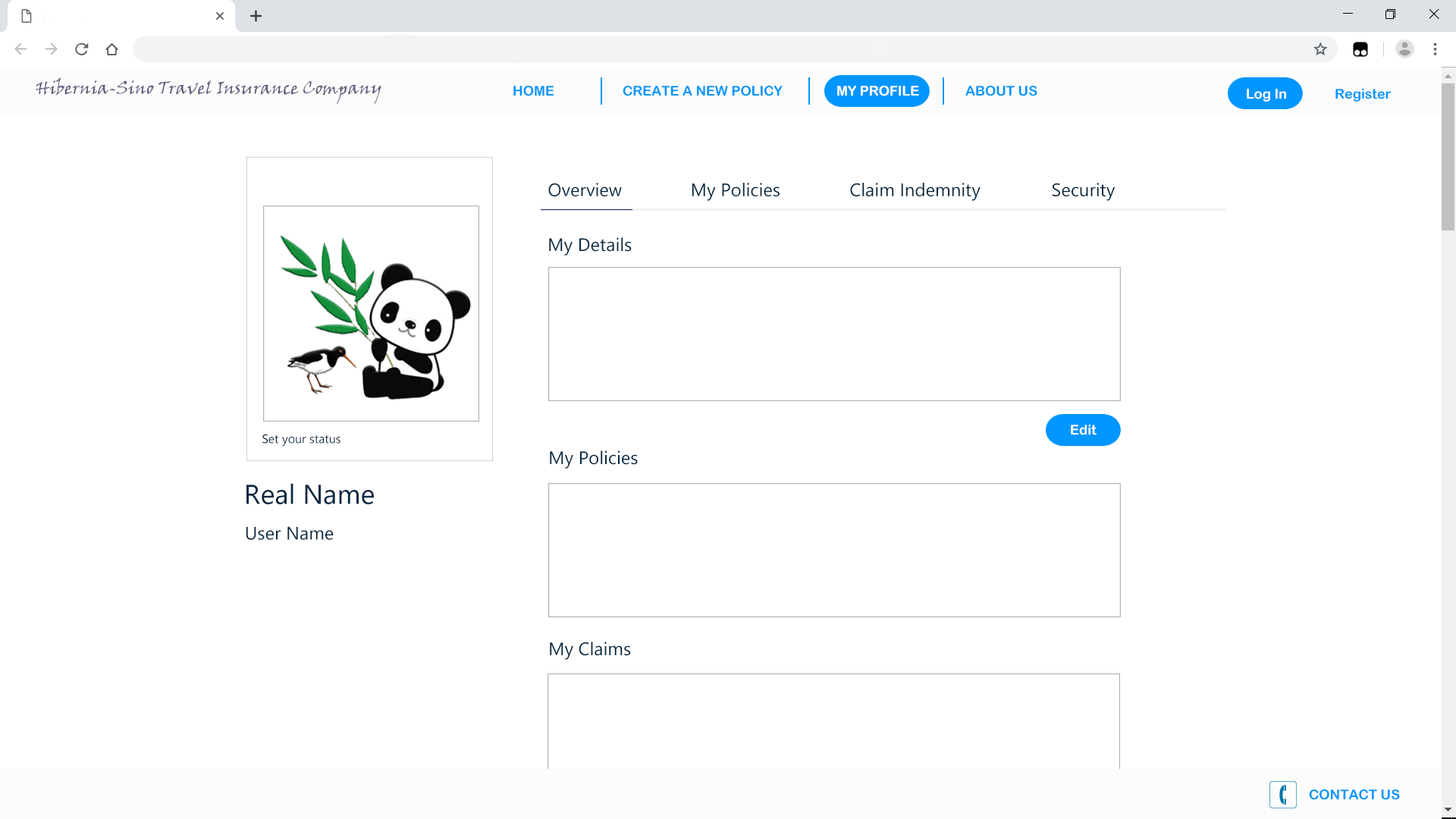
<style>
.page{position:relative;width:1456px;height:819px;background:#ffffff}
.page>*{position:absolute;margin:0}
.t1{font:17.7px "VinerHandITC";color:#5f617e}
.t2{font:13.6px "ArialRoundedMTBold";color:#0096ff}
.t3{font:13.6px "ArialRoundedMTBold";color:#ffffff}
.t4{font:18.2px "SegoeUIHistoric";color:#072941}
.t5{font:12.1px "SegoeUIHistoric";color:#072941}
.t6{font:27.3px "SegoeUIHistoric";color:#072941}
</style>
<div class="page">
<p class="t1" style="left:36px;top:77px;width:345px;height:27px">Hibernia-Sino Travel Insurance Company</p>
<p class="t2" style="left:513px;top:86px;width:41px;height:10px">HOME</p>
<p class="t2" style="left:623px;top:86px;width:160px;height:10px">CREATE A NEW POLICY</p>
<p class="t3" style="left:837px;top:86px;width:82px;height:10px">MY PROFILE</p>
<p class="t2" style="left:965px;top:86px;width:72px;height:10px">ABOUT US</p>
<p class="t3" style="left:1247px;top:89px;width:39px;height:13px">Log In</p>
<p class="t2" style="left:1335px;top:89px;width:57px;height:13px">Register</p>
<p class="t4" style="left:548px;top:183px;width:74px;height:13px">Overview</p>
<p class="t4" style="left:692px;top:183px;width:88px;height:18px">My Policies</p>
<p class="t4" style="left:850px;top:183px;width:131px;height:18px">Claim Indemnity</p>
<p class="t4" style="left:1053px;top:183px;width:62px;height:18px">Security</p>
<p class="t4" style="left:549px;top:237px;width:83px;height:19px">My Details</p>
<p class="t3" style="left:1071px;top:425px;width:26px;height:10px">Edit</p>
<p class="t5" style="left:262px;top:434px;width:78px;height:13px">Set your status</p>
<p class="t4" style="left:550px;top:450px;width:88px;height:19px">My Policies</p>
<p class="t6" style="left:246px;top:483px;width:128px;height:21px">Real Name</p>
<p class="t4" style="left:246px;top:526px;width:88px;height:14px">User Name</p>
<p class="t4" style="left:550px;top:642px;width:81px;height:18px">My Claims</p>
<p class="t2" style="left:1309px;top:789px;width:91px;height:11px">CONTACT US</p>
</div>
